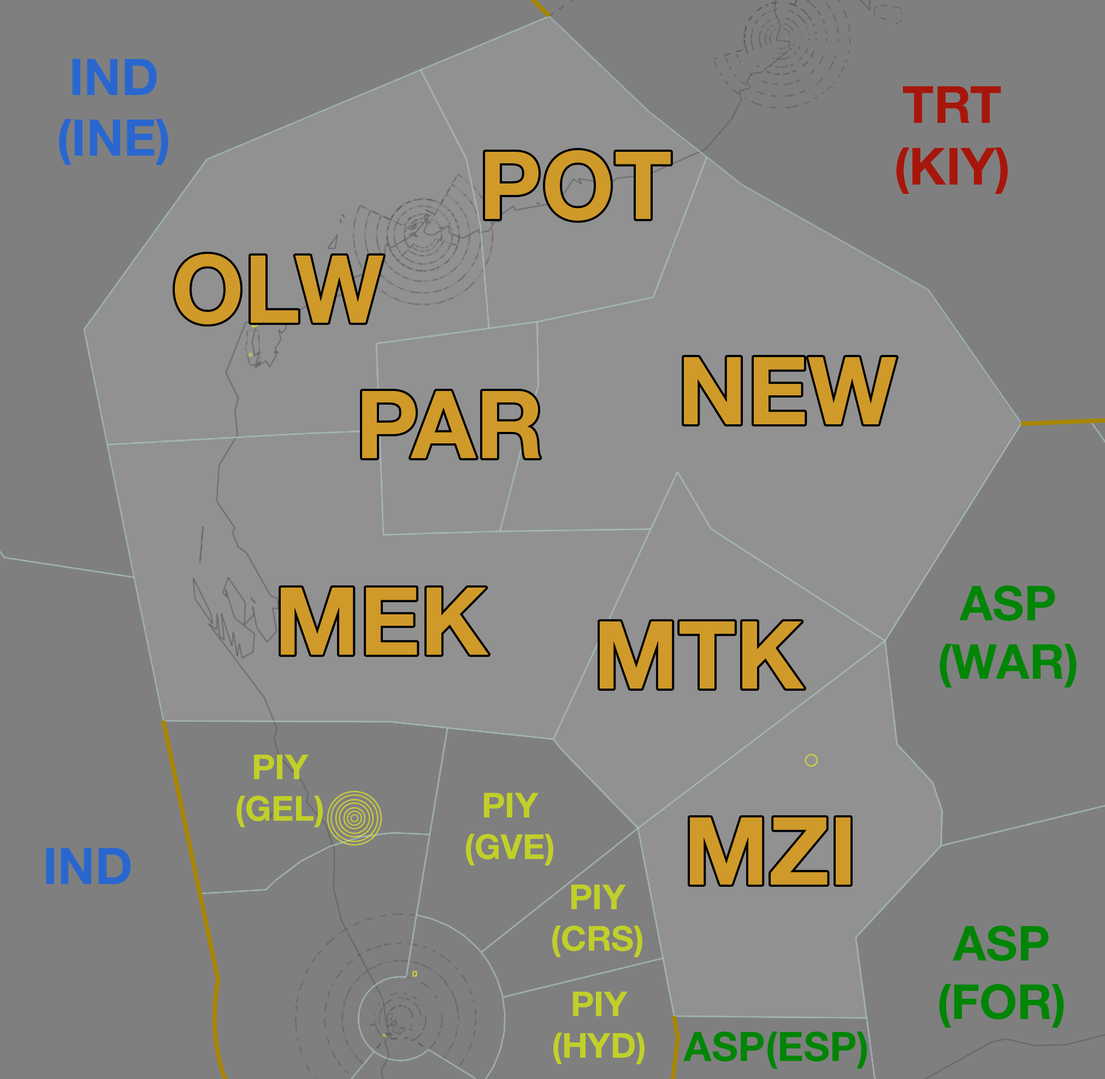
<style>
.page{position:relative;width:1105px;height:1079px;background:#7f7f7f}
.page>*{position:absolute;margin:0}
.t1{font:50.5px "HelveticaNeueLTStd-Bd";color:#2967cf}
.t2{font:51.4px "HelveticaNeueLTStd-Bd";color:#a7160b}
.t3{font:94px "HelveticaNeueLTStd-Bd";color:#cf9a29}
.t4{font:48.3px "HelveticaNeueLTStd-Bd";color:#008506}
.t5{font:34.6px "HelveticaNeueLTStd-Bd";color:#c1cf29}
.t6{font:40.6px "HelveticaNeueLTStd-Bd";color:#008506}
</style>
<div class="page">
<p class="t1" style="left:59px;top:59px;width:109px;height:106px;text-align:center">IND<br>(INE)</p>
<p class="t2" style="left:896px;top:86px;width:112px;height:108px;text-align:center">TRT<br>(KIY)</p>
<p class="t3" style="left:485px;top:150px;width:186px;height:71px">POT</p>
<p class="t3" style="left:175px;top:254px;width:208px;height:70px">OLW</p>
<p class="t3" style="left:684px;top:357px;width:212px;height:67px">NEW</p>
<p class="t3" style="left:362px;top:391px;width:178px;height:67px">PAR</p>
<p class="t3" style="left:281px;top:588px;width:208px;height:67px">MEK</p>
<p class="t4" style="left:939px;top:585px;width:137px;height:103px;text-align:center">ASP<br>(WAR)</p>
<p class="t3" style="left:600px;top:622px;width:205px;height:67px">MTK</p>
<p class="t5" style="left:236px;top:755px;width:87px;height:72px;text-align:center">PIY<br>(GEL)</p>
<p class="t5" style="left:466px;top:793px;width:87px;height:73px;text-align:center">PIY<br>(GVE)</p>
<p class="t3" style="left:690px;top:818px;width:160px;height:67px">MZI</p>
<p class="t1" style="left:46px;top:848px;width:85px;height:36px">IND</p>
<p class="t5" style="left:552px;top:885px;width:90px;height:72px;text-align:center">PIY<br>(CRS)</p>
<p class="t4" style="left:939px;top:926px;width:125px;height:102px;text-align:center">ASP<br>(FOR)</p>
<p class="t5" style="left:553px;top:992px;width:91px;height:72px;text-align:center">PIY<br>(HYD)</p>
<p class="t6" style="left:683px;top:1032px;width:184px;height:37px">ASP(ESP)</p>
</div>
